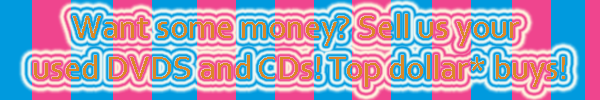
<style>
.page{position:relative;width:600px;height:100px}
.page>*{position:absolute;margin:0}
.t1{font:34px "Corbel";color:#db8827}
</style>
<div class="page">
<p class="t1" style="left:34px;top:14px;width:531px;height:73px">Want some money? Sell us your <br>used DVDS and CDs! Top dollar* buys!</p>
</div>
